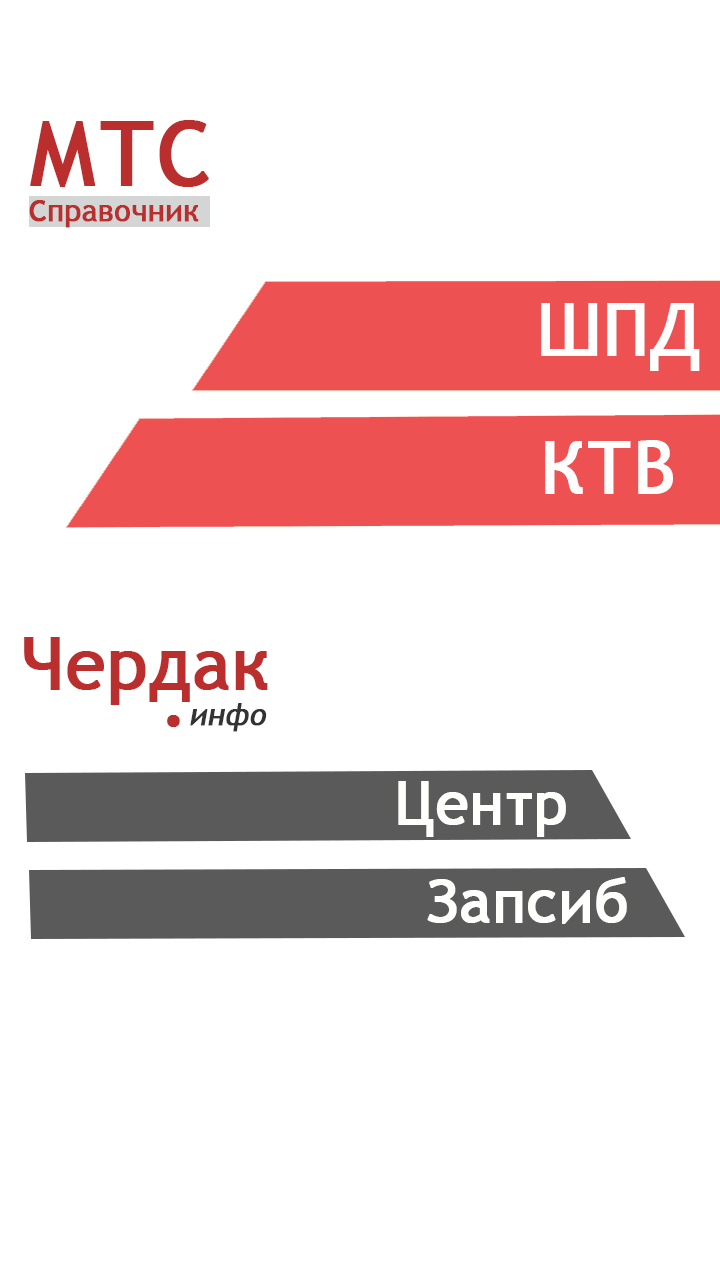
<style>
.page{position:relative;width:720px;height:1280px;background:#ffffff}
.page>*{position:absolute;margin:0}
.t1{font:30px "TrebuchetMS";color:#bb2e2e;font-weight:bold}
.t2{font:90px "TrebuchetMS";color:#bb2e2e;font-weight:bold}
.t3{font:72px "TrebuchetMS";color:#fefefe;font-weight:bold}
.t4{font:72px "TrebuchetMS";color:#bb2e2e;font-weight:bold}
.t5{font:30px "TrebuchetMS";color:#343333;font-weight:bold;font-style:italic}
.t6{font:60px "TrebuchetMS";color:#fffffe;font-weight:bold}
</style>
<div class="page">
<p class="t1" style="left:29px;top:120px;width:180px;height:108px;text-align:right"><span class="t2">МТС<br></span>Справочник</p>
<p class="t3" style="left:541px;top:303px;width:159px;height:68px">ШПД</p>
<p class="t3" style="left:545px;top:440px;width:128px;height:54px">КТВ</p>
<p class="t4" style="left:24px;top:637px;width:244px;height:68px">Чердак</p>
<p class="t5" style="left:167px;top:703px;width:100px;height:29px"><span class="t4">.</span>инфо</p>
<p class="t6" style="left:398px;top:781px;width:168px;height:56px">Центр</p>
<p class="t6" style="left:427px;top:877px;width:200px;height:47px">Запсиб</p>
</div>
